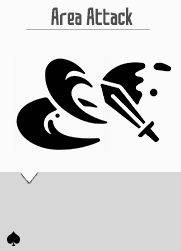
<style>
.page{position:relative;width:181px;height:251px;background:#fbfbfb}
.page>*{position:absolute;margin:0}
.t1{font:21.4px "SAOUI-Regular";color:#4d4d4d}
</style>
<div class="page">
<p class="t1" style="left:51px;top:7px;width:82px;height:18px">Area Attack</p>
</div>
